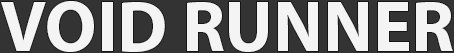
<style>
.page{position:relative;width:454px;height:53px;background:#f4f4f4}
.page>*{position:absolute;margin:0}
.t1{font:72px "MyriadHebrew-Bold";color:#f4f4f4}
</style>
<div class="page">
<p class="t1" style="left:1px;top:1px;width:452px;height:51px">VOID RUNNER</p>
</div>
